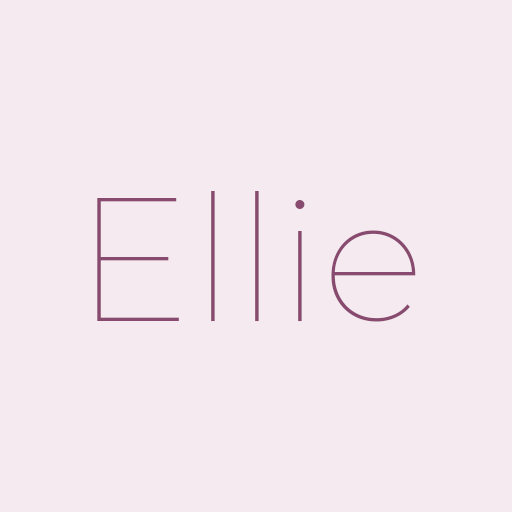
<style>
.page{position:relative;width:512px;height:512px;background:#f5eaef}
.page>*{position:absolute;margin:0}
.t1{font:175px "Montserrat-Thin";color:#884a6f}
</style>
<div class="page">
<p class="t1" style="left:97px;top:191px;width:319px;height:131px">Ellie</p>
</div>
